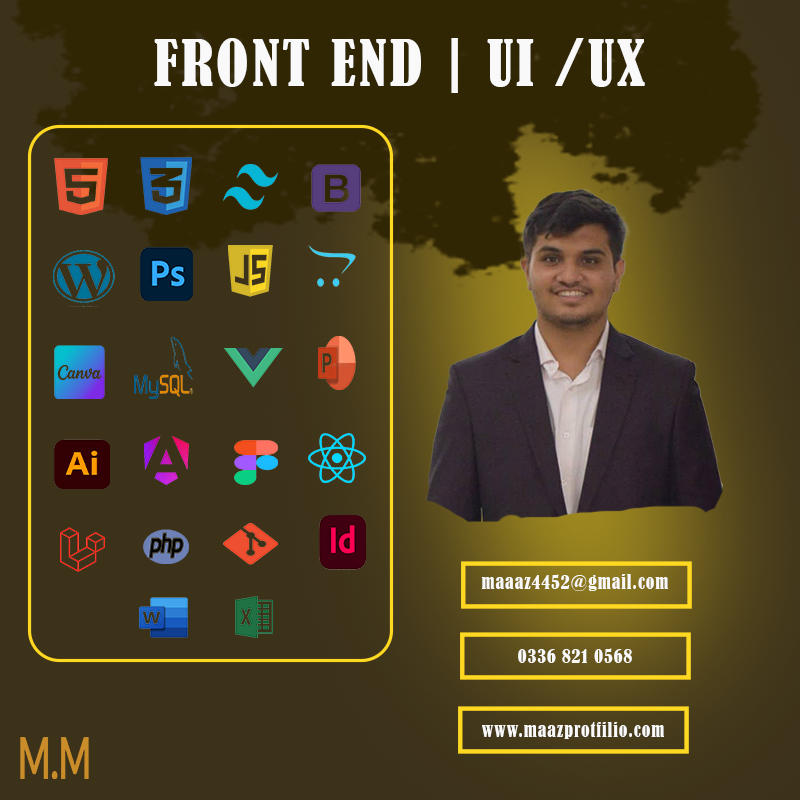
<style>
.page{position:relative;width:800px;height:800px;background:#3c321a}
.page>*{position:absolute;margin:0}
.t1{font:60px "BernardMT-Condensed";letter-spacing:0.05em;color:#f9f9f9}
.t2{font:18px "BernardMT-Condensed";letter-spacing:0.05em;color:#f9f9f9}
</style>
<div class="page">
<p class="t1" style="left:154px;top:38px;width:491px;height:55px">FRONT END | UI /UX</p>
<p class="t2" style="left:481px;top:574px;width:187px;height:17px">maaaz4452@gmail.com</p>
<p class="t2" style="left:518px;top:648px;width:114px;height:15px">0336 821 0568</p>
<p class="t2" style="left:482px;top:722px;width:182px;height:17px">www.maazprotfilio.com</p>
</div>
